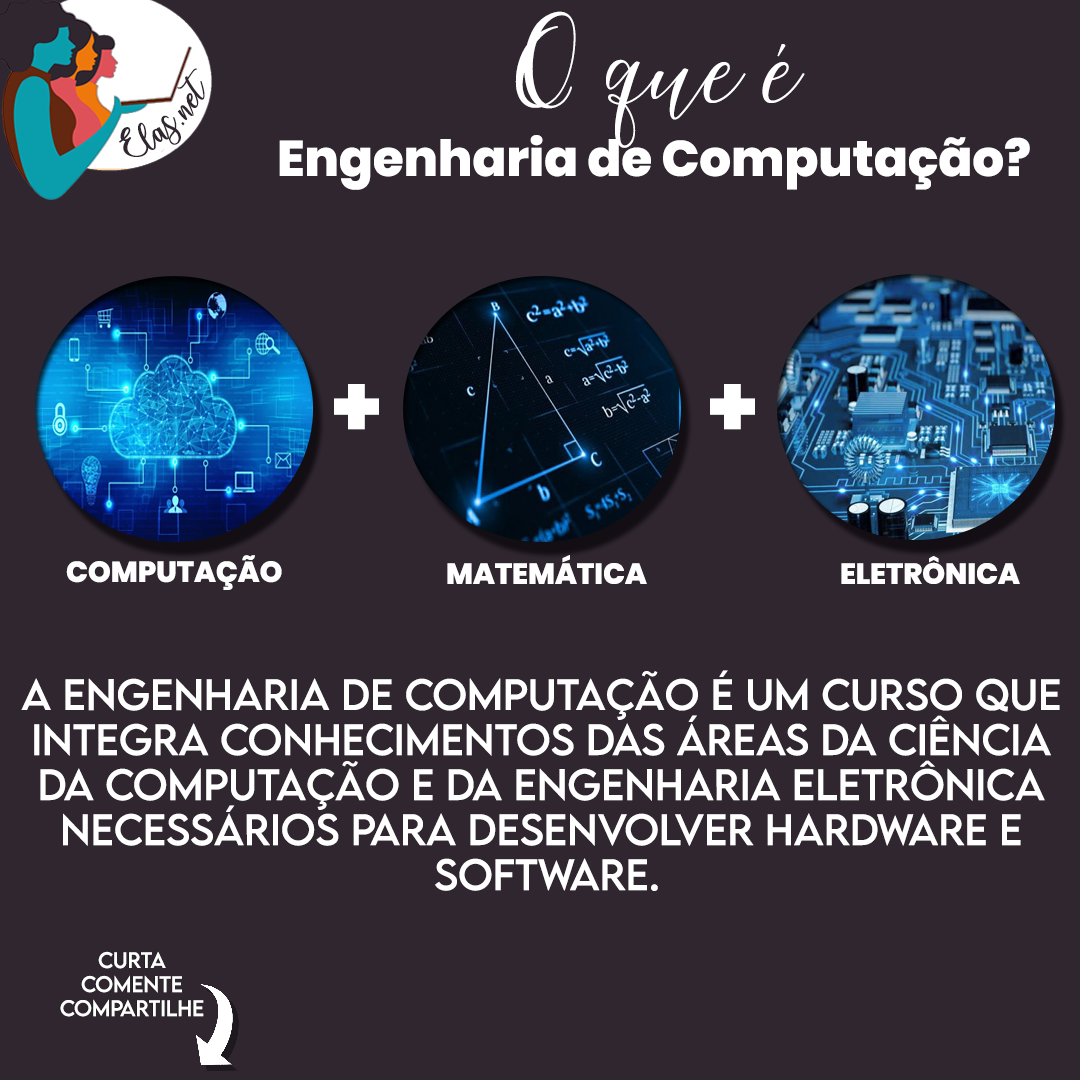
<style>
.page{position:relative;width:1080px;height:1080px;background:#2f262f}
.page>*{position:absolute;margin:0}
.t1{font:50px "Poppins-ExtraBold";color:#ffffff}
.t2{font:142.1px "MaheisaScript";color:#ffffff}
.t3{font:25px "charlinda-Regular";color:#2f262f;scale:1.18 1}
.t4{font:88px "Poppins-ExtraBold";color:#ffffff}
.t5{font:29px "Poppins-ExtraBold";color:#ffffff}
.t6{font:39px/45px "LEMONMILK-Regular";color:#ffffff}
.t7{font:20px "LEMONMILK-Regular"}
.t8{font:20px "LEMONMILK-Regular";color:#ffffff}
</style>
<div class="page">
<p class="t1" style="left:279px;top:11px;width:751px;height:179px;text-align:center"><span class="t2">O que é<br></span>Engenharia de Computação?</p>
<p class="t3" style="left:119px;top:68px;width:86px;height:89px;rotate:-43deg">Elas.net</p>
<p class="t4" style="left:334px;top:384px;width:45px;height:46px">+</p>
<p class="t4" style="left:710px;top:384px;width:45px;height:46px">+</p>
<p class="t5" style="left:66px;top:555px;width:216px;height:35px">COMPUTAÇÃO</p>
<p class="t5" style="left:447px;top:555px;width:200px;height:29px">MATEMÁTICA</p>
<p class="t5" style="left:841px;top:556px;width:179px;height:28px">ELETRÔNICA</p>
<p class="t6" style="left:21px;top:670px;width:1039px;height:221px;text-align:center">A Engenharia de Computação é um curso que <br>integra conhecimentos das áreas da Ciência <br>da Computação e da Engenharia Eletrônica <br>necessários para desenvolver hardware e <br>software.</p>
<p class="t7" style="left:59px;top:951px;width:144px;height:66px;text-align:center">Curta<br>Comente<br>Compartilhe</p>
<p class="t8" style="left:60px;top:951px;width:144px;height:66px;text-align:center">Curta<br>Comente<br>Compartilhe</p>
</div>
